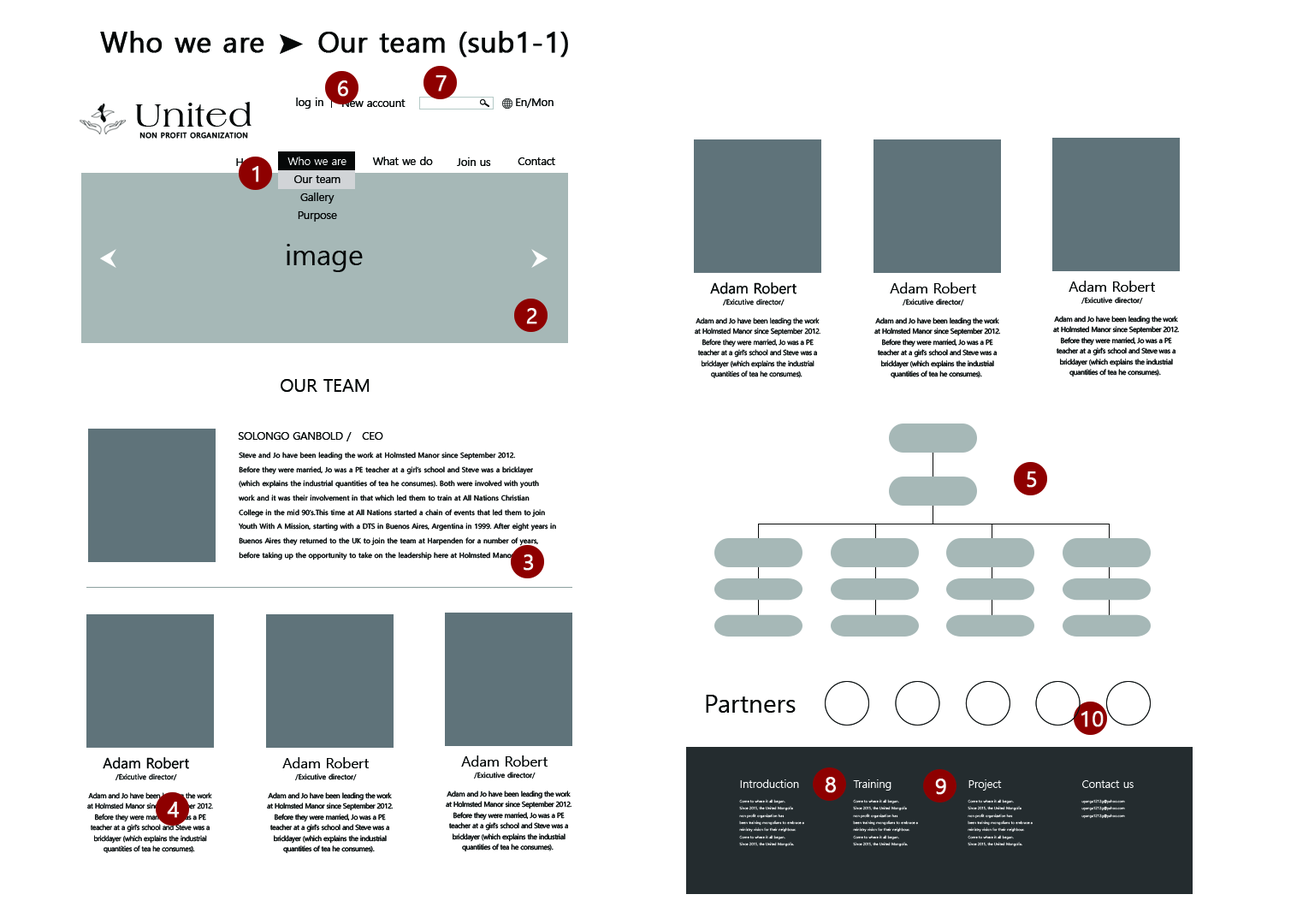
<style>
.page{position:relative;width:1291px;height:924px;background:#ffffff}
.page>*{position:absolute;margin:0}
.t1{font:28.5px "MalgunGothic";color:#060808;font-weight:bold}
.t2{font:21.4px "MalgunGothic";color:#f5f7f7;font-weight:bold}
.t3{font:35.1px "MogulLaguna";color:#060808}
.t4{font:10.7px "MalgunGothic";color:#060808}
.t5{font:7px "MalgunGothic";letter-spacing:0.05em;color:#060808;text-transform:uppercase;font-weight:bold}
.t6{font:10.7px "MalgunGothic";color:#8e0000}
.t7{font:28.5px "MalgunGothic";color:#060808}
.t8{font:7.1px/10.7px "MalgunGothic";color:#060808}
.t9{font:14.3px/10.7px "MalgunGothic";color:#060808}
.t10{font:14.2px/10.7px "MalgunGothic";color:#060808}
.t11{font:7.1px/10.7px "MalgunGothic";letter-spacing:-0.05em;color:#060808}
.t12{font:17.8px "MalgunGothic";color:#060808}
.t13{font:10.7px "MalgunGothic";color:#060808;text-transform:uppercase}
.t14{font:7.1px/14.3px "MalgunGothic";color:#060808}
.t15{font:24.9px "MalgunGothic";color:#060808}
.t16{font:3.6px/7.1px "MalgunGothic";color:#ffffff}
.t17{font:10.7px/64.2px "MalgunGothic";color:#ffffff}
.t18{font:3.6px/14.3px "MalgunGothic";color:#ffffff}
</style>
<div class="page">
<p class="t1" style="left:100px;top:31px;width:164px;height:22px">Who we are</p>
<p class="t1" style="left:318px;top:31px;width:250px;height:26px">Our team (sub1-1)</p>
<p class="t2" style="left:435px;top:75px;width:12px;height:17px">7</p>
<p class="t2" style="left:337px;top:80px;width:11px;height:17px">6</p>
<p class="t3" style="left:135px;top:102px;width:116px;height:25px">United</p>
<p class="t4" style="left:296px;top:98px;width:27px;height:11px">log in</p>
<p class="t4" style="left:342px;top:99px;width:63px;height:8px">New account</p>
<p class="t4" style="left:516px;top:98px;width:37px;height:10px">En/Mon</p>
<p class="t5" style="left:139px;top:132px;width:109px;height:7px">non profit organization</p>
<p class="t6" style="left:236px;top:158px;width:29px;height:8px">Home</p>
<p class="t4" style="left:372px;top:157px;width:61px;height:8px">What we do</p>
<p class="t4" style="left:457px;top:157px;width:34px;height:9px">Join us</p>
<p class="t4" style="left:518px;top:157px;width:37px;height:8px">Contact</p>
<p class="t2" style="left:252px;top:166px;width:7px;height:16px">1</p>
<p class="t7" style="left:287px;top:244px;width:76px;height:28px">image</p>
<p class="t8" style="left:1068px;top:281px;width:87px;height:24px;text-align:center"><span class="t9">Adam Robert<br></span>/Exicutive director/</p>
<p class="t8" style="left:710px;top:282px;width:86px;height:24px;text-align:center"><span class="t10">Adam Robert<br></span>/Exicutive director/</p>
<p class="t8" style="left:890px;top:282px;width:86px;height:24px;text-align:center"><span class="t9">Adam Robert<br></span>/Exicutive director/</p>
<p class="t2" style="left:526px;top:308px;width:11px;height:16px">2</p>
<p class="t11" style="left:695px;top:317px;width:125px;height:61px;text-align:center">Adam and Jo have been leading the work<br>at Holmsted Manor since September 2012.<br>Before they were married, Jo was a PE<br>teacher at a girl’s school and Steve was a<br>bricklayer (which explains the industrial<br>quantities of tea he consumes).</p>
<p class="t11" style="left:874px;top:317px;width:126px;height:62px;text-align:center">Adam and Jo have been leading the work<br>at Holmsted Manor since September 2012.<br>Before they were married, Jo was a PE<br>teacher at a girl’s school and Steve was a<br>bricklayer (which explains the industrial<br>quantities of tea he consumes).</p>
<p class="t11" style="left:1053px;top:316px;width:126px;height:61px;text-align:center">Adam and Jo have been leading the work<br>at Holmsted Manor since September 2012.<br>Before they were married, Jo was a PE<br>teacher at a girl’s school and Steve was a<br>bricklayer (which explains the industrial<br>quantities of tea he consumes).</p>
<p class="t12" style="left:281px;top:379px;width:89px;height:13px">OUR TEAM</p>
<p class="t13" style="left:238px;top:432px;width:145px;height:9px">Solongo Ganbold <span class="t4">/   CEO</span></p>
<p class="t14" style="left:239px;top:452px;width:317px;height:108px">Steve and Jo have been leading the work at Holmsted Manor since September 2012.<br>Before they were married, Jo was a PE teacher at a girl’s school and Steve was a bricklayer<br>(which explains the industrial quantities of tea he consumes). Both were involved with youth<br>work and it was their involvement in that which led them to train at All Nations Christian<br>College in the mid 90’s.This time at All Nations started a chain of events that led them to join<br>Youth With A Mission, starting with a DTS in Buenos Aires, Argentina in 1999. After eight years in<br>Buenos Aires they returned to the UK to join the team at Harpenden for a number of years,<br>before taking up the opportunity to take on the leadership here at Holmsted Manor.</p>
<p class="t2" style="left:1026px;top:471px;width:11px;height:17px">5</p>
<p class="t2" style="left:523px;top:554px;width:11px;height:17px">3</p>
<p class="t15" style="left:706px;top:695px;width:90px;height:18px">Partners</p>
<p class="t2" style="left:1081px;top:711px;width:22px;height:16px">10</p>
<p class="t8" style="left:103px;top:757px;width:86px;height:24px;text-align:center"><span class="t10">Adam Robert<br></span>/Exicutive director/</p>
<p class="t8" style="left:282px;top:757px;width:87px;height:24px;text-align:center"><span class="t9">Adam Robert<br></span>/Exicutive director/</p>
<p class="t8" style="left:461px;top:755px;width:86px;height:24px;text-align:center"><span class="t9">Adam Robert<br></span>/Exicutive director/</p>
<p class="t16" style="left:739px;top:779px;width:65px;height:68px"><span class="t17">Introduction<br></span><span class="t18">Come to where it all began.<br></span>Since 2015, the United Mongolia<br>non profit organization has<br>been training mongolians to embrace a<br>ministry vision for their neighbour.<br>Come to where it all began.<br>Since 2015, the United Mongolia.</p>
<p class="t2" style="left:825px;top:777px;width:11px;height:16px">8</p>
<p class="t16" style="left:853px;top:779px;width:65px;height:68px"><span class="t17">Training<br></span><span class="t18">Come to where it all began.<br></span>Since 2015, the United Mongolia<br>non profit organization has<br>been training mongolians to embrace a<br>ministry vision for their neighbour.<br>Come to where it all began.<br>Since 2015, the United Mongolia.</p>
<p class="t2" style="left:935px;top:778px;width:11px;height:17px">9</p>
<p class="t16" style="left:967px;top:779px;width:65px;height:68px"><span class="t17">Project<br></span><span class="t18">Come to where it all began.<br></span>Since 2015, the United Mongolia<br>non profit organization has<br>been training mongolians to embrace a<br>ministry vision for their neighbour.<br>Come to where it all began.<br>Since 2015, the United Mongolia.</p>
<p class="t16" style="left:1081px;top:780px;width:52px;height:39px"><span class="t17">Contact us<br></span><span class="t18">uyanga1212g@yahoo.com<br></span>uyanga1212g@yahoo.com<br>uyanga1212g@yahoo.com</p>
<p class="t11" style="left:87px;top:792px;width:126px;height:61px;text-align:center">Adam and Jo have been leading the work<br>at Holmsted Manor since September 2012.<br>Before they were married, Jo was a PE<br>teacher at a girl’s school and Steve was a<br>bricklayer (which explains the industrial<br>quantities of tea he consumes).</p>
<p class="t11" style="left:267px;top:792px;width:126px;height:62px;text-align:center">Adam and Jo have been leading the work<br>at Holmsted Manor since September 2012.<br>Before they were married, Jo was a PE<br>teacher at a girl’s school and Steve was a<br>bricklayer (which explains the industrial<br>quantities of tea he consumes).</p>
<p class="t11" style="left:446px;top:790px;width:125px;height:62px;text-align:center">Adam and Jo have been leading the work<br>at Holmsted Manor since September 2012.<br>Before they were married, Jo was a PE<br>teacher at a girl’s school and Steve was a<br>bricklayer (which explains the industrial<br>quantities of tea he consumes).</p>
<p class="t2" style="left:167px;top:801px;width:13px;height:17px">4</p>
</div>
